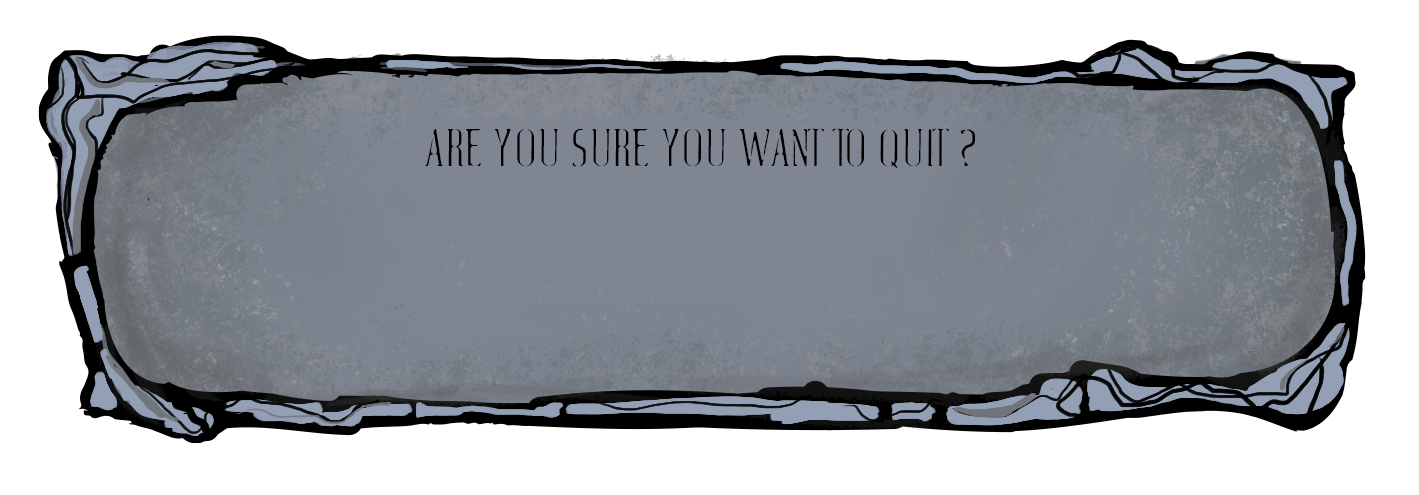
<style>
.page{position:relative;width:1419px;height:495px;background:#ffffff}
.page>*{position:absolute;margin:0}
.t1{font:48px "Fluid-light";letter-spacing:-0.04em;color:#000000}
</style>
<div class="page">
<p class="t1" style="left:425px;top:128px;width:550px;height:40px">ARE YOU SURE YOU WANT TO QUIT ?</p>
</div>
